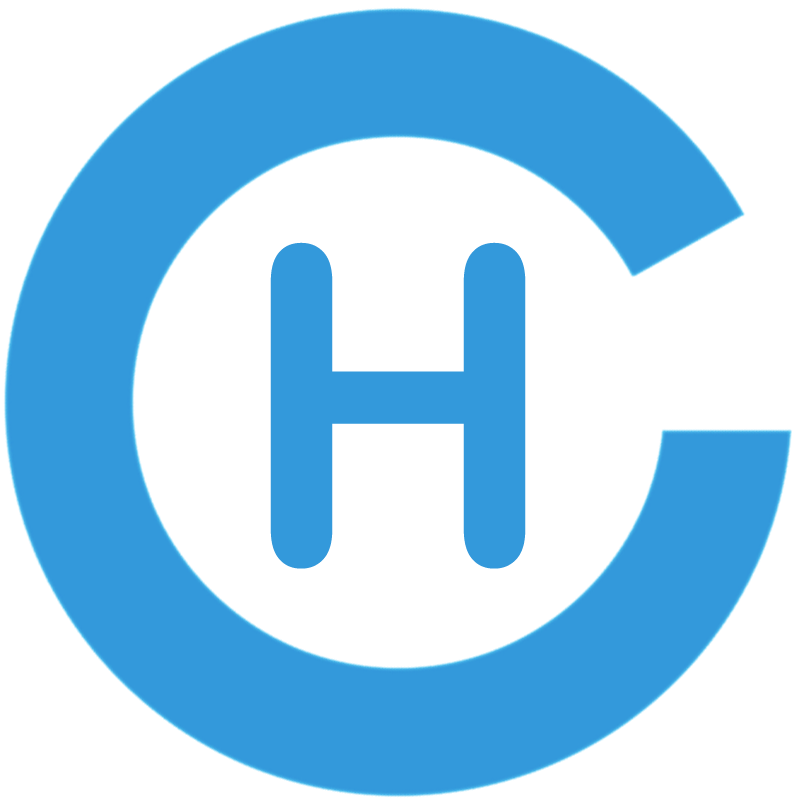
<style>
.page{position:relative;width:800px;height:800px;background:#ffffff}
.page>*{position:absolute;margin:0}
.t1{font:440px "ArialRoundedMTBold";color:#3399db;scale:0.96 1}
</style>
<div class="page">
<p class="t1" style="left:270px;top:242px;width:256px;height:327px">H</p>
</div>
